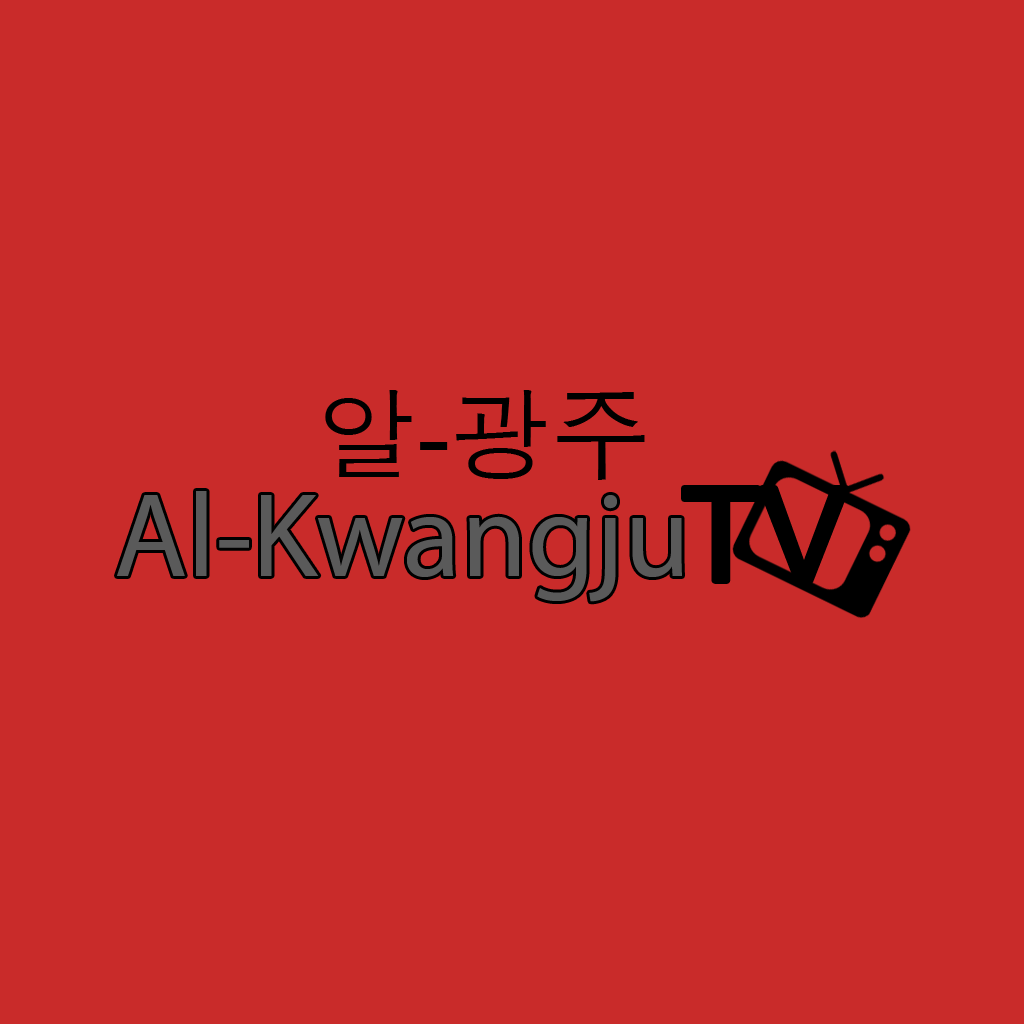
<style>
.page{position:relative;width:1024px;height:1024px;background:#c92b2a}
.page>*{position:absolute;margin:0}
.t1{font:100px "AppleGothic";color:#000000}
.t2{font:100px "ArialMT";color:#000000}
.t3{font:120px "MyriadPro-Regular";color:#5a5a5a}
.t4{font:130px "ArialMT";color:#000000}
</style>
<div class="page">
<p class="t1" style="left:325px;top:390px;width:320px;height:90px">알<span class="t2">-</span>광주</p>
<p class="t3" style="left:117px;top:491px;width:565px;height:111px">Al-Kwangju</p>
<p class="t4" style="left:684px;top:488px;width:163px;height:93px">TV</p>
</div>
